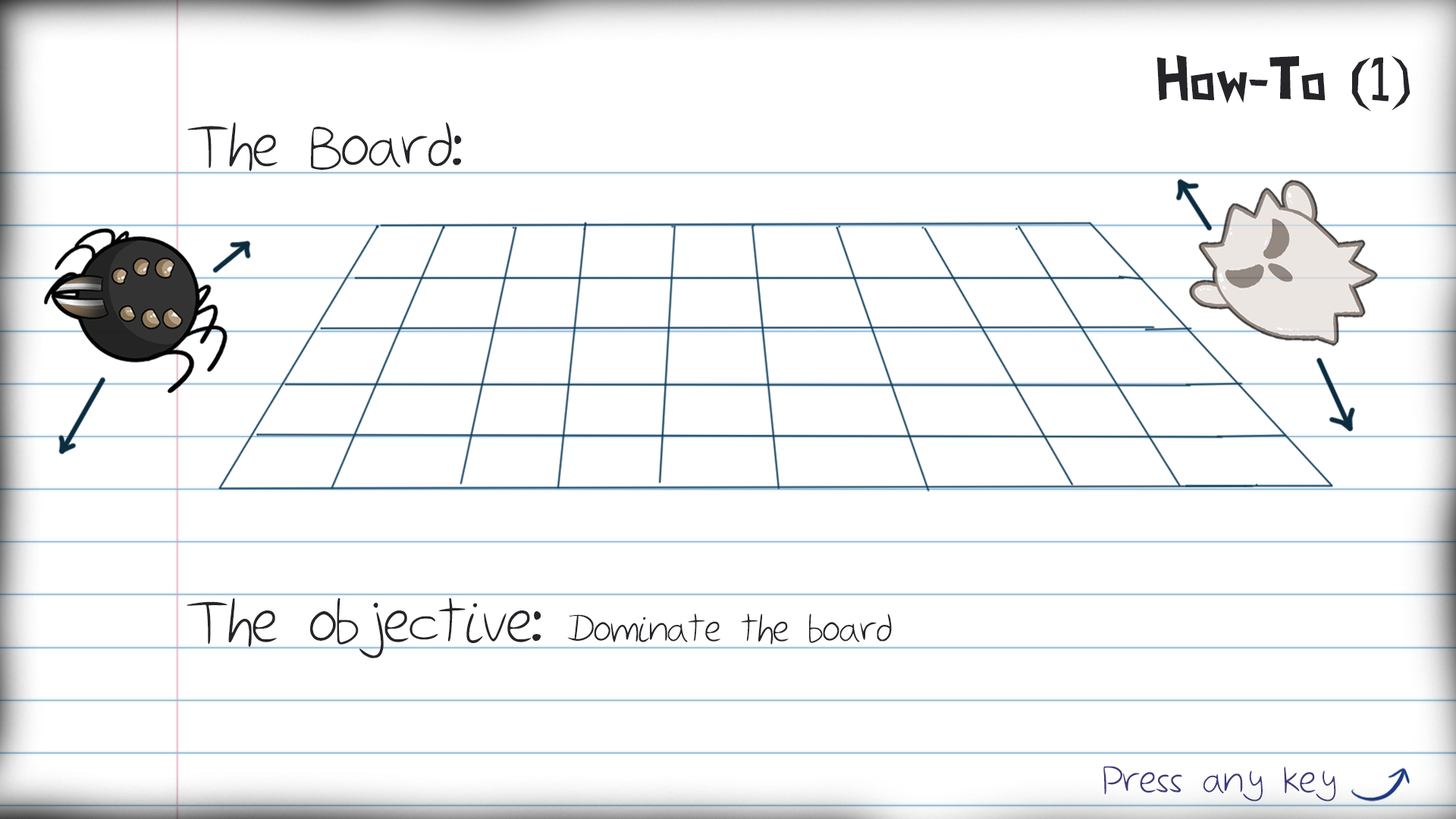
<style>
.page{position:relative;width:1456px;height:819px;background:#ffffff}
.page>*{position:absolute;margin:0}
.t1{font:59.4px "PaperCuts2";color:#242429}
.t2{font:77px "Sketchbook";color:#242429}
.t3{font:48px "Sketchbook";color:#242429}
.t4{font:49.5px "Sketchbook";color:#3d3d78}
</style>
<div class="page">
<p class="t1" style="left:1156px;top:55px;width:254px;height:56px">How-To (1)</p>
<p class="t2" style="left:187px;top:122px;width:275px;height:49px">The Board:</p>
<p class="t2" style="left:187px;top:598px;width:354px;height:60px">The objective:</p>
<p class="t3" style="left:567px;top:613px;width:325px;height:32px">Dominate the board</p>
<p class="t4" style="left:1103px;top:766px;width:233px;height:36px">Press any key</p>
</div>
